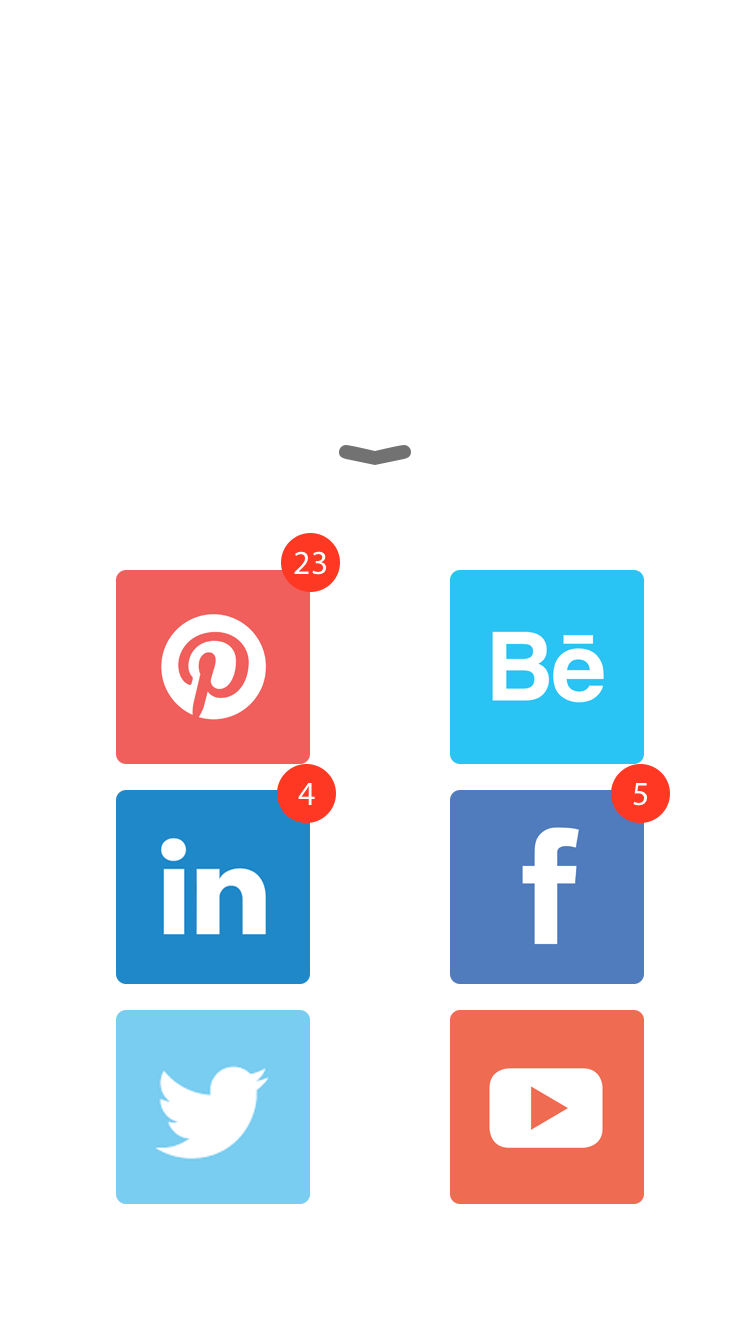
<style>
.page{position:relative;width:750px;height:1334px;background:#ffffff}
.page>*{position:absolute;margin:0}
.t1{font:33.8px "MyriadPro-Regular";color:#ffffff}
</style>
<div class="page">
<p class="t1" style="left:294px;top:551px;width:33px;height:24px">23</p>
<p class="t1" style="left:298px;top:783px;width:17px;height:22px">4</p>
<p class="t1" style="left:633px;top:783px;width:14px;height:23px">5</p>
</div>
